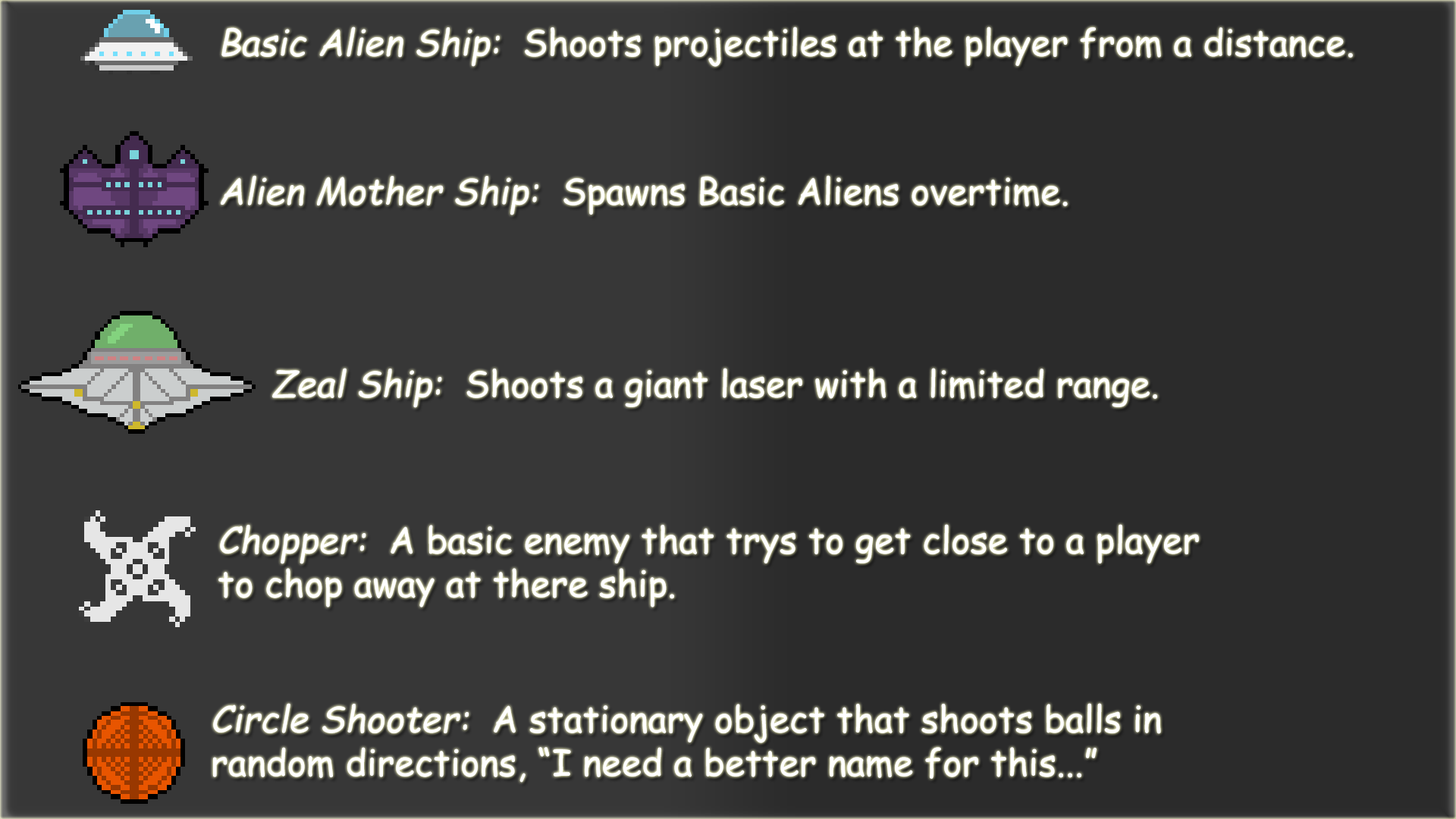
<style>
.page{position:relative;width:1456px;height:819px;background:#2b2b2b}
.page>*{position:absolute;margin:0}
.t1{font:36.4px "ComicSansMS";color:#ffffff}
.t2{font:36.4px "ComicSansMS-Italic";color:#ffffff}
</style>
<div class="page">
<p class="t1" style="left:221px;top:27px;width:1132px;height:40px"><span class="t2">Basic Alien Ship:</span>  Shoots projectiles at the player from a distance.</p>
<p class="t1" style="left:221px;top:175px;width:847px;height:40px"><span class="t2">Alien Mother Ship:</span>  Spawns Basic Aliens overtime.</p>
<p class="t1" style="left:272px;top:368px;width:885px;height:40px"><span class="t2">Zeal Ship:</span>  Shoots a giant laser with a limited range.</p>
<p class="t1" style="left:218px;top:524px;width:981px;height:83px"><span class="t2">Chopper:</span>  A basic enemy that trys to get close to a player<br>to chop away at there ship.</p>
<p class="t1" style="left:213px;top:703px;width:948px;height:80px"><span class="t2">Circle Shooter:</span>  A stationary object that shoots balls in <br>random directions, “I need a better name for this...”</p>
</div>
